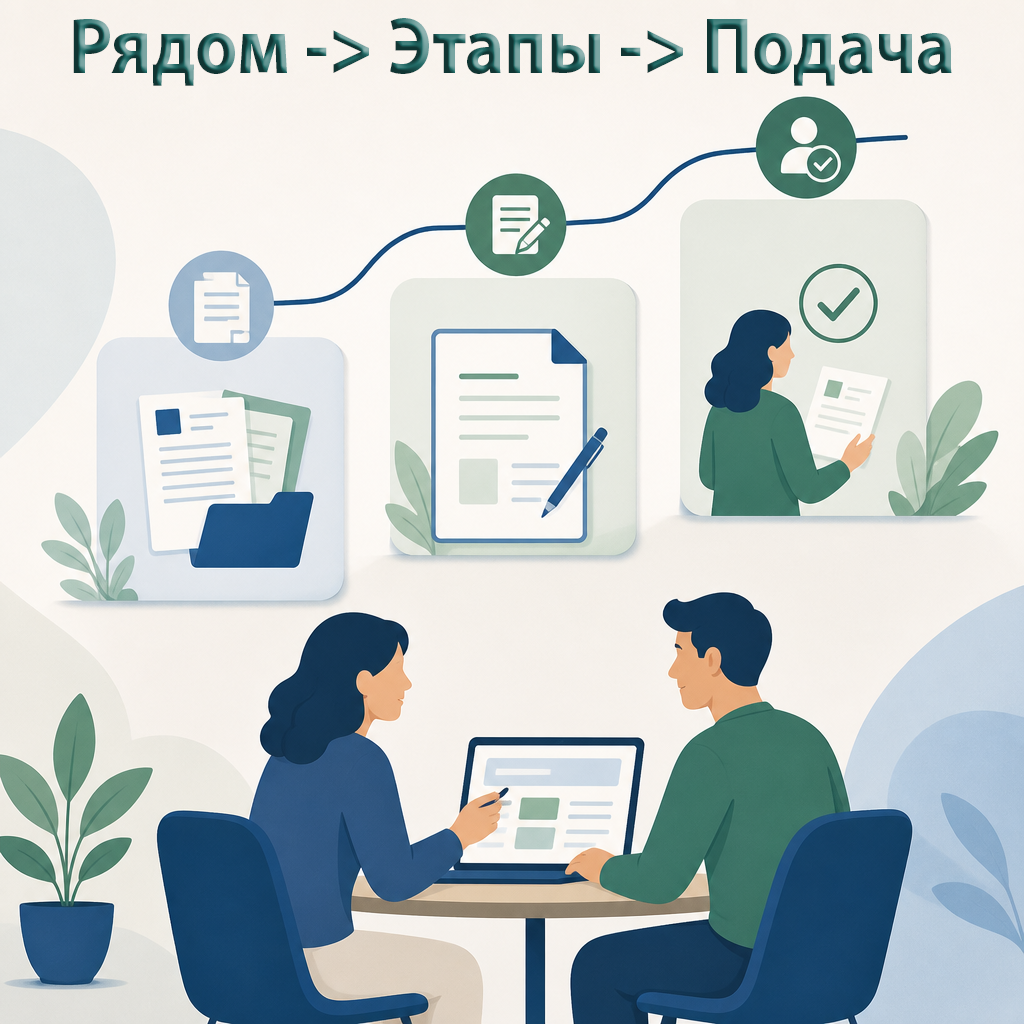
<style>
.page{position:relative;width:1024px;height:1024px}
.page>*{position:absolute;margin:0}
.t1{font:80px "MyriadPro-Bold";scale:0.92 1}
</style>
<div class="page">
<p class="t1" style="left:73px;top:18px;width:879px;height:68px">Рядом -&gt; Этапы -&gt; Подача</p>
</div>
